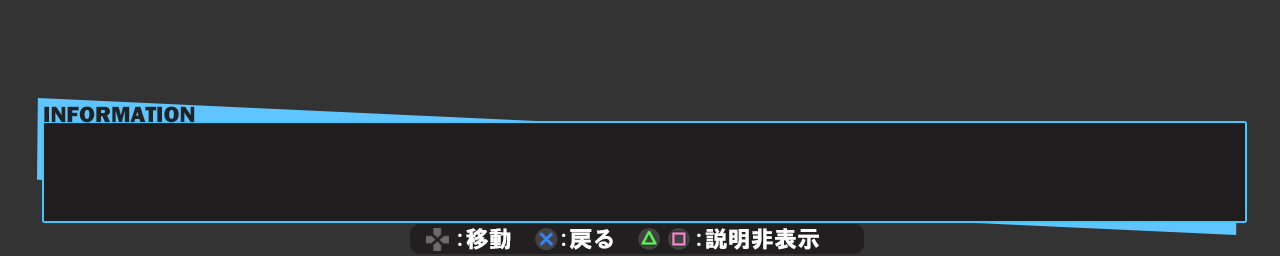
<style>
.page{position:relative;width:1280px;height:256px;background:#333333}
.page>*{position:absolute;margin:0}
.t1{font:23px "FranklinGothic-Heavy";color:#212223}
.t2{font:23px "HGSoeiKakugothicUB";color:#ffffff}
</style>
<div class="page">
<p class="t1" style="left:44px;top:106px;width:151px;height:17px">INFORMATION</p>
<p class="t2" style="left:458px;top:228px;width:53px;height:22px">:移動</p>
<p class="t2" style="left:562px;top:229px;width:51px;height:21px">:戻る</p>
<p class="t2" style="left:697px;top:228px;width:122px;height:22px">:説明非表示</p>
</div>
